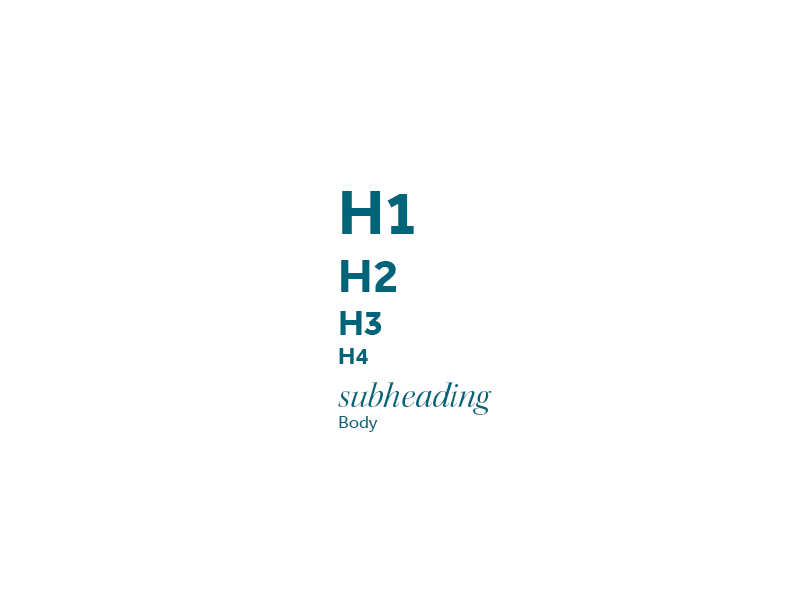
<style>
.page{position:relative;width:800px;height:600px;background:#ffffff}
.page>*{position:absolute;margin:0}
.t1{font:36px "KeplerStd-ItDisp";color:#006579}
.t2{font:64px "Effra-Bold";color:#006579}
.t3{font:48px "Effra-Bold";color:#006579}
.t4{font:36px "Effra-Bold";color:#006579}
.t5{font:24px "Effra-Bold";color:#006579}
.t6{font:18px "Effra-Regular";color:#006579}
</style>
<div class="page">
<p class="t1" style="left:338px;top:191px;width:154px;height:241px"><span class="t2">H1<br></span><span class="t3">H2<br></span><span class="t4">H3<br></span><span class="t5">H4<br></span>subheading<br><span class="t6">Body</span></p>
</div>
